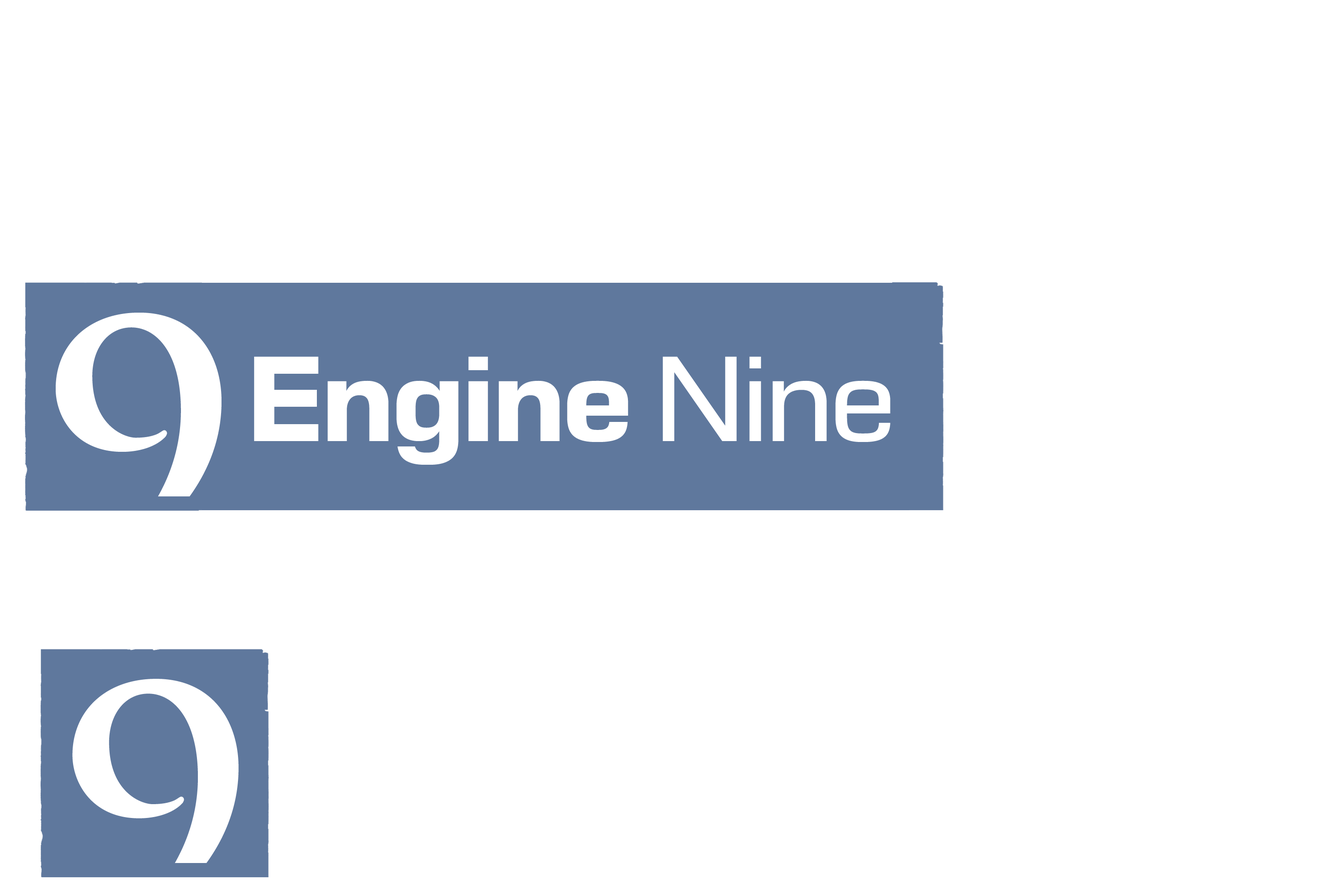
<style>
.page{position:relative;width:1337px;height:892px;background:#ffffff}
.page>*{position:absolute;margin:0}
.t1{font:326.9px "TrajanPro-Bold";color:#ffffff}
.t2{font:115.9px "Moire-Bold";letter-spacing:-0.05em;color:#ffffff}
.t3{font:115.9px "Moire";letter-spacing:-0.05em;color:#ffffff}
</style>
<div class="page">
<p class="t1" style="left:56px;top:313px;width:166px;height:258px">9</p>
<p class="t2" style="left:254px;top:356px;width:637px;height:109px">Engine <span class="t3">Nine</span></p>
</div>
